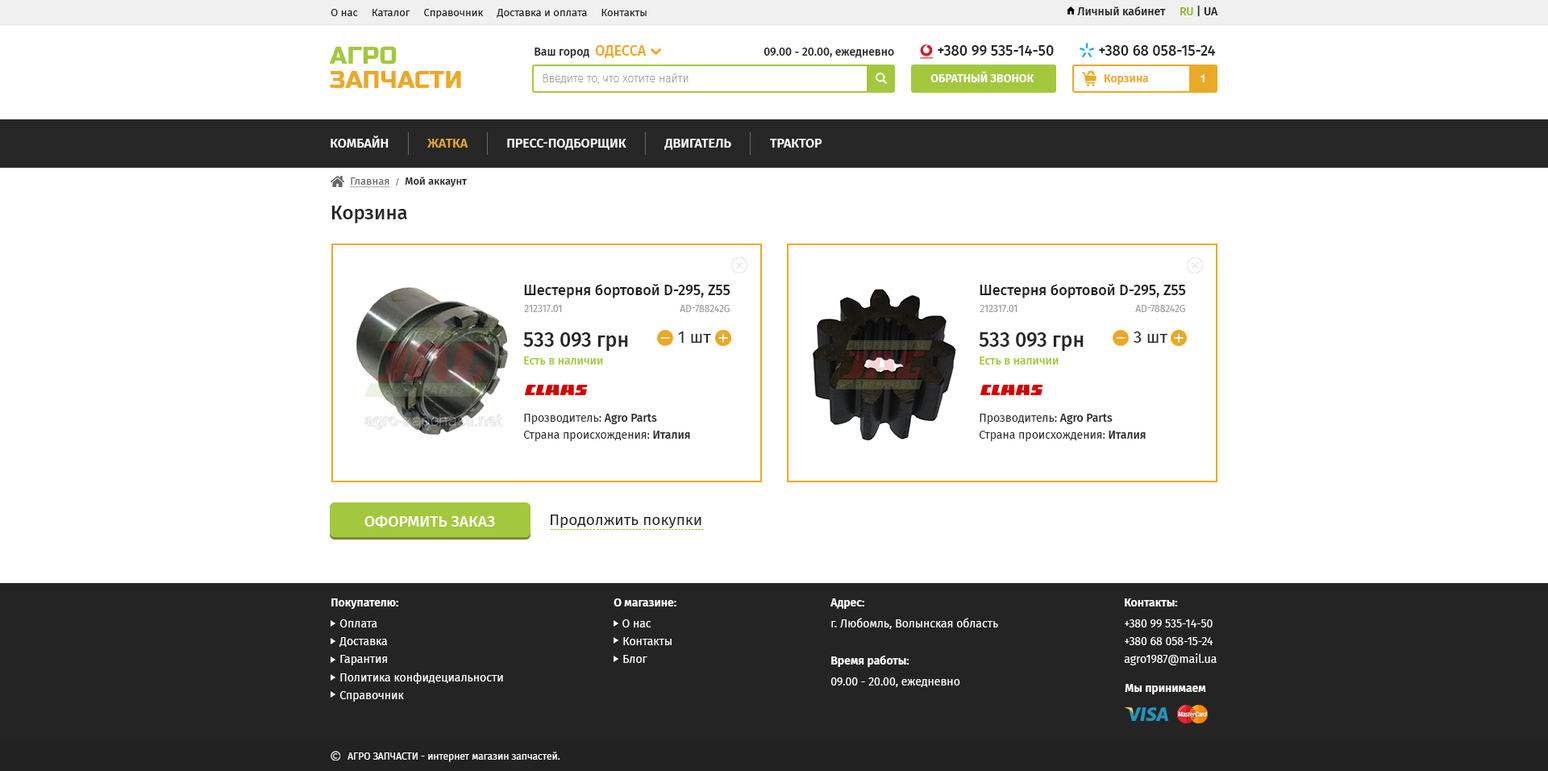
<style>
.page{position:relative;width:1548px;height:771px;background:#ffffff}
.page>*{position:absolute;margin:0}
.t1{font:11.3px "FiraSans-Medium";color:#212121}
.t2{font:11.3px "FiraSans-Medium";color:#91b627}
.t3{font:10.5px "FiraSans-Regular";color:#212121}
.t4{font:24.2px/24.2px "RussoOne-Regular";color:#eaa926;text-transform:uppercase}
.t5{font:24.2px/24.2px "RussoOne-Regular";color:#a4c83d;text-transform:uppercase}
.t6{font:11.3px "FiraSans-Medium";color:#272727}
.t7{font:14.5px "FiraSans-Medium";color:#eaa926}
.t8{font:14.5px "FiraSans-Medium";color:#272727}
.t9{font:11.3px "FiraSans-Thin";color:#777777}
.t10{font:11.3px "FiraSans-SemiBold";color:#ffffff;text-transform:uppercase}
.t11{font:11.3px "FiraSans-SemiBold";color:#eaa926}
.t12{font:11.3px "HelveticaNeueCyr-Bold";color:#ffffff}
.t13{font:12.9px "FiraSans-Medium";color:#ffffff;text-transform:uppercase}
.t14{font:12.9px "FiraSans-Medium";color:#eaa926;text-transform:uppercase}
.t15{font:10.5px "FiraSans-Medium";color:#212121}
.t16{font:10.5px "FiraSans-Regular";color:#676767;text-decoration:underline}
.t17{font:8.1px "FiraSans-Regular";color:#676767}
.t18{font:19.3px "FiraSans-Medium";color:#282828}
.t19{font:14.5px "FiraSans-Medium";color:#212121}
.t20{font:9.7px "FiraSans-Regular";color:#9e9e9e;text-transform:uppercase}
.t21{font:9.7px "FiraSans-Regular";color:#9e9e9e}
.t22{font:20.2px "FiraSans-Medium";color:#272727}
.t23{font:16.9px "FiraSans-Regular";color:#272727}
.t24{font:16.9px "FiraSans-Regular";color:#212121}
.t25{font:11.3px "FiraSans-Medium";color:#a4c83d}
.t26{font:11.3px/16.9px "FiraSans-Regular";color:#272727}
.t27{font:11.3px/16.9px "FiraSans-Medium";color:#272727}
.t28{font:15.3px "FiraSans-Medium";color:#fffefe;text-transform:uppercase}
.t29{font:15.3px "FiraSans-Regular";color:#272727}
.t30{font:11.3px/17.7px "FiraSans-Regular";color:#ffffff}
.t31{font:11.3px/21px "FiraSans-SemiBold";color:#ffffff}
.t32{font:11.3px/21px "FiraSans-Regular";color:#ffffff}
.t33{font:11.3px "FiraSans-SemiBold";color:#ffffff}
.t34{font:9.7px "FiraSans-Regular";color:#ffffff}
</style>
<div class="page">
<p class="t1" style="left:1077px;top:6px;width:141px;height:10px">Личный кабинет     <span class="t2">RU</span> | UA</p>
<p class="t3" style="left:330px;top:9px;width:316px;height:10px">О нас     Каталог     Справочник     Доставка и оплата     Контакты</p>
<p class="t4" style="left:329px;top:46px;width:132px;height:43px"><span class="t5">АГРО<br></span>ЗАПЧАСТИ</p>
<p class="t6" style="left:534px;top:45px;width:112px;height:13px">Ваш город  <span class="t7">ОДЕССА</span></p>
<p class="t6" style="left:763px;top:48px;width:131px;height:10px">09.00 - 20.00, ежедневно</p>
<p class="t8" style="left:937px;top:45px;width:116px;height:11px">+380 99 535-14-50</p>
<p class="t8" style="left:1099px;top:45px;width:116px;height:11px">+380 68 058-15-24</p>
<p class="t9" style="left:542px;top:73px;width:146px;height:11px">Введите то, что хотите найти</p>
<p class="t10" style="left:930px;top:71px;width:104px;height:11px">Обратный звонок</p>
<p class="t11" style="left:1103px;top:74px;width:46px;height:11px">Корзина</p>
<p class="t12" style="left:1200px;top:74px;width:4px;height:9px">1</p>
<p class="t13" style="left:330px;top:135px;width:492px;height:15px">КОМБАЙН            <span class="t14">ЖАТКА            </span>ПРЕСС-ПОДБОРЩИК            ДВИГАТЕЛЬ            трактор</p>
<p class="t15" style="left:350px;top:177px;width:117px;height:11px"><span class="t16">Главная  </span><span class="t17">/  </span>Мой аккаунт</p>
<p class="t18" style="left:331px;top:206px;width:76px;height:17px">Корзина</p>
<p class="t19" style="left:524px;top:284px;width:206px;height:14px">Шестерня бортовой D-295, Z55</p>
<p class="t19" style="left:979px;top:284px;width:207px;height:14px">Шестерня бортовой D-295, Z55</p>
<p class="t20" style="left:524px;top:305px;width:38px;height:7px">212317.01</p>
<p class="t21" style="left:679px;top:305px;width:50px;height:7px"><span class="t20">AD-</span>788242G</p>
<p class="t20" style="left:979px;top:305px;width:38px;height:7px">212317.01</p>
<p class="t21" style="left:1135px;top:305px;width:50px;height:7px"><span class="t20">AD-</span>788242G</p>
<p class="t22" style="left:523px;top:332px;width:105px;height:19px">533 093 грн</p>
<p class="t23" style="left:678px;top:331px;width:33px;height:12px"><span class="t24"><br><br>                 </span>  1 шт</p>
<p class="t22" style="left:978px;top:332px;width:105px;height:19px">533 093 грн</p>
<p class="t23" style="left:1133px;top:331px;width:34px;height:12px"><span class="t24"><br><br>                 </span>  3 шт</p>
<p class="t25" style="left:524px;top:356px;width:79px;height:8px">Есть в наличии</p>
<p class="t25" style="left:979px;top:356px;width:79px;height:8px">Есть в наличии</p>
<p class="t26" style="left:523px;top:413px;width:167px;height:28px">Прозводитель: <span class="t27">Agro Parts          <br></span>Страна происхождения:<span class="t27"> Италия</span></p>
<p class="t26" style="left:978px;top:413px;width:167px;height:28px">Прозводитель: <span class="t27">Agro Parts          <br></span>Страна происхождения:<span class="t27"> Италия</span></p>
<p class="t28" style="left:364px;top:515px;width:131px;height:12px">оформить заказ</p>
<p class="t29" style="left:551px;top:514px;width:150px;height:14px">Продолжить покупки</p>
<p class="t30" style="left:331px;top:598px;width:172px;height:103px"><span class="t31">Покупателю:<br></span><span class="t32">   Оплата<br></span>   Доставка<br>   Гарантия<br>   Политика конфидециальности<br>   Справочник</p>
<p class="t30" style="left:613px;top:598px;width:63px;height:65px"><span class="t31">О магазине:<br>   </span><span class="t32">О нас<br></span>   Контакты<br>   Блог</p>
<p class="t32" style="left:830px;top:598px;width:168px;height:31px"><span class="t31">Адрес:<br></span>г. Любомль, Волынская область</p>
<p class="t30" style="left:1124px;top:598px;width:92px;height:67px"><span class="t31">Контакты:<br></span><span class="t32">+380 99 535-14-50<br></span>+380 68 058-15-24<br>agro1987@mail.ua</p>
<p class="t32" style="left:830px;top:654px;width:130px;height:33px"><span class="t31">Время работы:<br></span>09.00 - 20.00, ежедневно</p>
<p class="t33" style="left:1124px;top:683px;width:82px;height:11px">Мы принимаем</p>
<p class="t34" style="left:347px;top:751px;width:213px;height:11px">АГРО ЗАПЧАСТИ - интернет магазин запчастей.</p>
</div>
